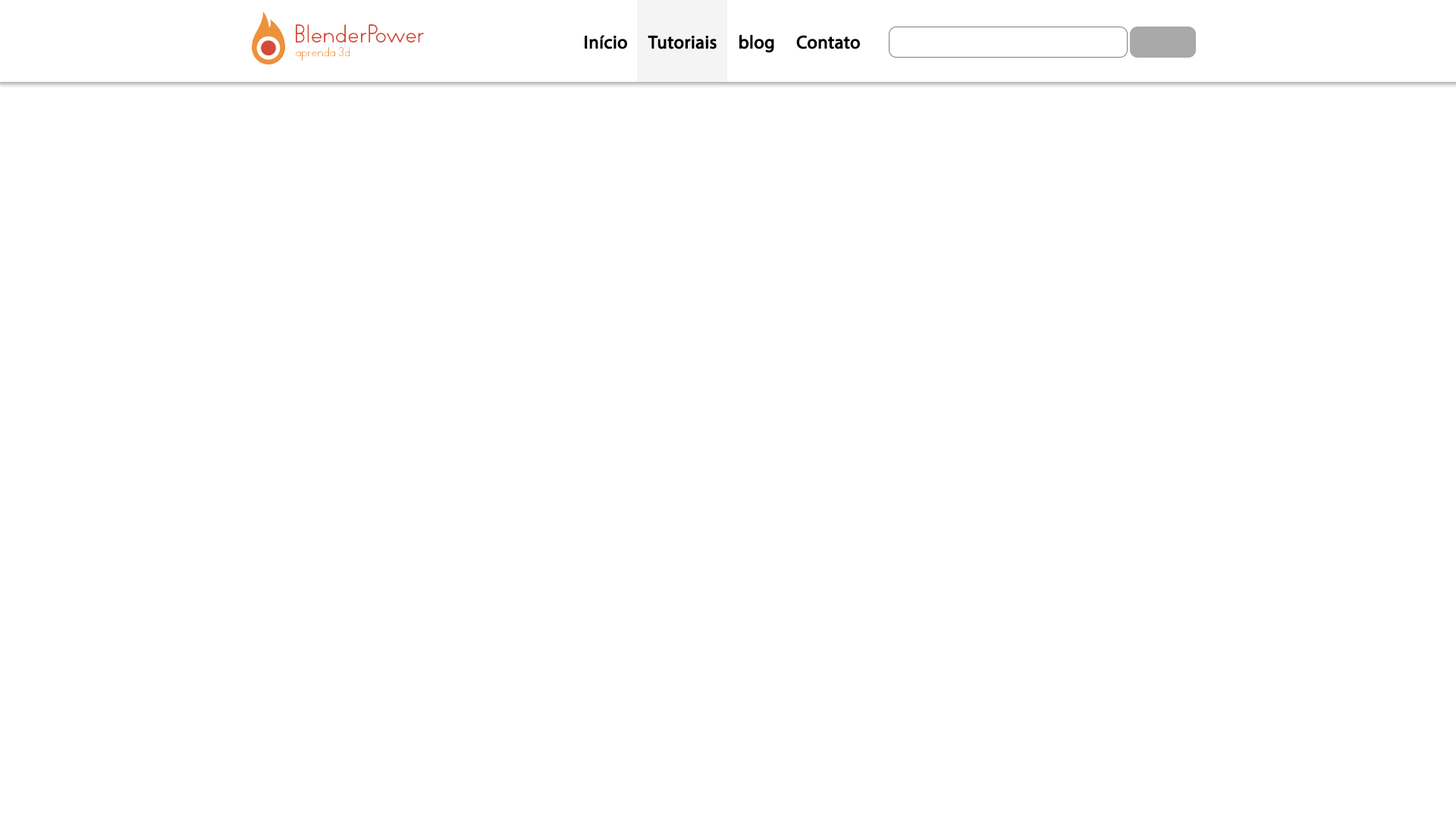
<style>
.page{position:relative;width:1456px;height:819px;background:#ffffff}
.page>*{position:absolute;margin:0}
.t1{font:25.3px "MyriadArabic-Regular";color:#000000;font-weight:bold}
</style>
<div class="page">
<p class="t1" style="left:585px;top:35px;width:275px;height:18px">Início    Tutoriais    blog    Contato</p>
</div>
